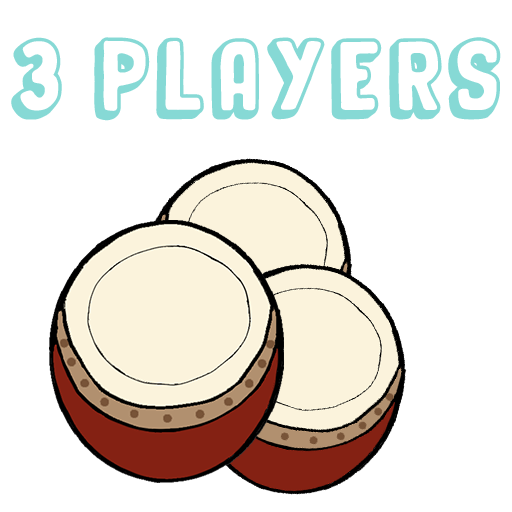
<style>
.page{position:relative;width:512px;height:512px;background:#ffffff}
.page>*{position:absolute;margin:0}
.t1{font:50px "OrganicRelief";letter-spacing:0.1em;color:#86d9d5}
</style>
<div class="page">
<p class="t1" style="left:11px;top:37px;width:490px;height:84px">3 PLAYERS</p>
</div>
